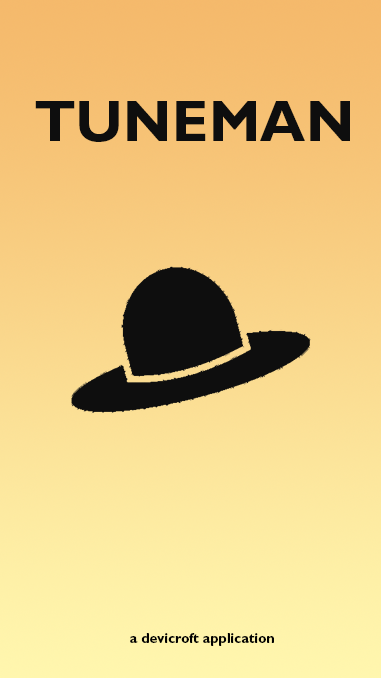
<style>
.page{position:relative;width:381px;height:678px}
.page>*{position:absolute;margin:0}
.t1{font:58.1px "GillSansMTPro-Bold";color:#0e0e0e}
.t2{font:14px "GillSansMTPro-Bold";color:#020202}
</style>
<div class="page">
<p class="t1" style="left:35px;top:101px;width:315px;height:41px">TUNEMAN</p>
<p class="t2" style="left:130px;top:633px;width:144px;height:13px">a devicroft application</p>
</div>
